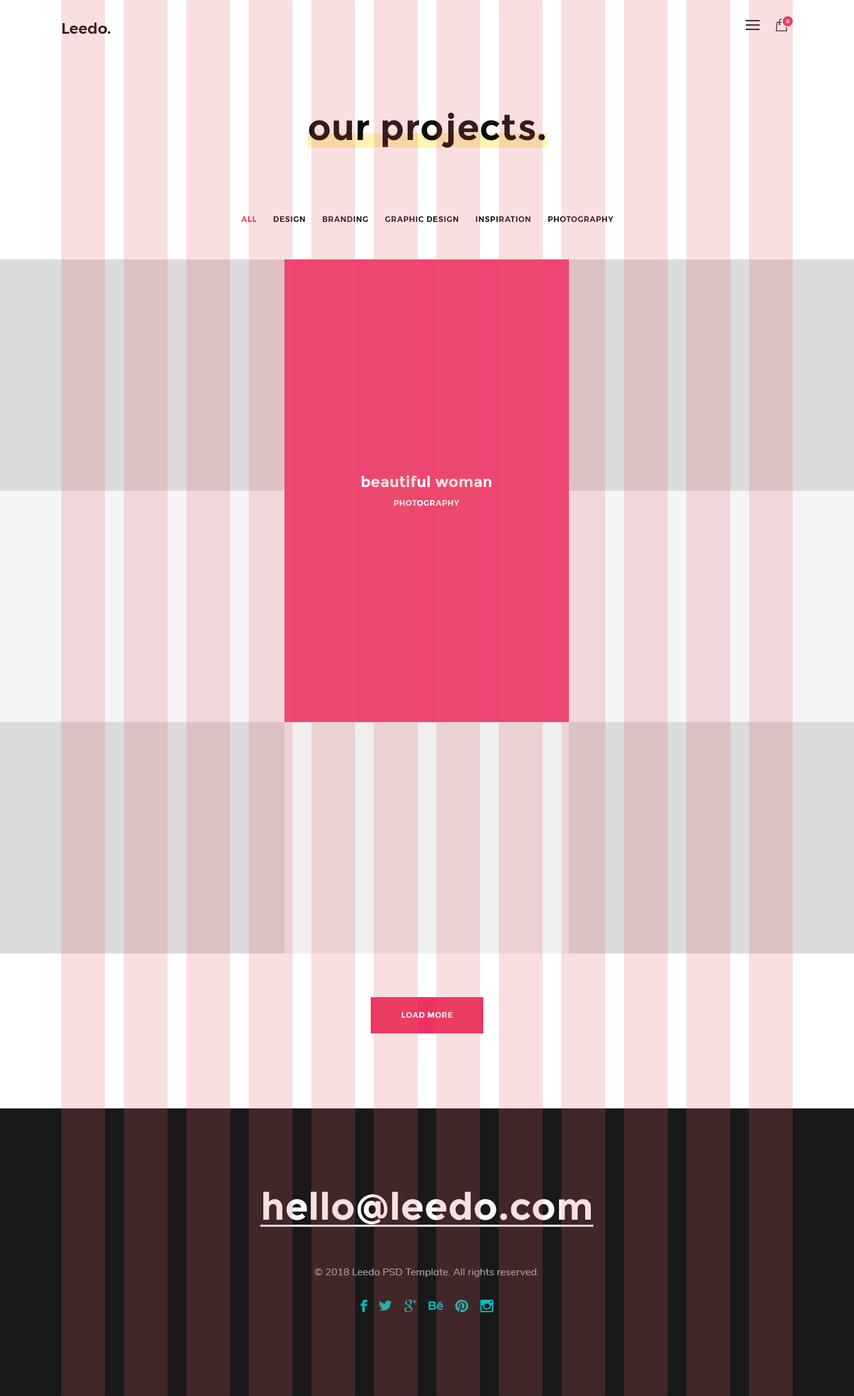
<style>
.page{position:relative;width:854px;height:1396px}
.page>*{position:absolute;margin:0}
.t1{font:15px "Montserrat-SemiBold";color:#3a2020}
.t2{font:5px "Montserrat-Medium";letter-spacing:0.05em;color:#f9dfdf;text-transform:uppercase}
.t3{font:36.3px "Montserrat-Bold";letter-spacing:0.01em;color:#351c1c}
.t4{font:7.5px "Montserrat-SemiBold";letter-spacing:0.075em;text-transform:uppercase}
.t5{font:15px "Montserrat-Bold";letter-spacing:0.01em}
.t6{font:7.5px "Montserrat-SemiBold";letter-spacing:0.075em;color:#f9dfdf;text-transform:uppercase}
.t7{font:37.5px "Montserrat-Bold";letter-spacing:0.01em;color:#f9dfdf;text-decoration:underline}
.t8{font:10px "Muli-Regular";color:#a7a7a7}
</style>
<div class="page">
<p class="t1" style="left:62px;top:23px;width:49px;height:11px">Leedo.</p>
<p class="t2" style="left:786px;top:19px;width:4px;height:4px">0</p>
<p class="t3" style="left:309px;top:113px;width:236px;height:35px">our projects.</p>
<p class="t4" style="left:241px;top:216px;width:372px;height:6px">all       design       branding       graphic design       inspiration       photography</p>
<p class="t5" style="left:361px;top:475px;width:130px;height:13px">beautiful woman</p>
<p class="t6" style="left:394px;top:500px;width:66px;height:6px">photography</p>
<p class="t4" style="left:401px;top:1012px;width:52px;height:6px">load more</p>
<p class="t7" style="left:260px;top:1192px;width:334px;height:35px">hello@leedo.com</p>
<p class="t8" style="left:314px;top:1269px;width:225px;height:8px">© 2018 Leedo PSD Template. All rights reserved.</p>
</div>
